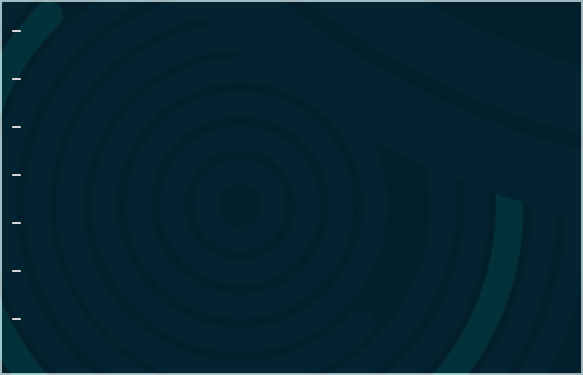
<style>
.page{position:relative;width:583px;height:375px;background:#032331}
.page>*{position:absolute;margin:0}
.t1{font:40px "HelveNueThin";letter-spacing:0.01em}
</style>
<div class="page">
<p class="t1" style="left:12px;top:30px;width:9px;height:290px;text-align:justify">- <br>-<br>-<br>-<br>-<br>-<br>-</p>
</div>
